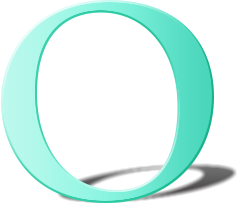
<style>
.page{position:relative;width:238px;height:203px;background:#ffffff}
.page>*{position:absolute;margin:0}
.t1{font:260px "TrajanPro-Bold";letter-spacing:0.005em}
</style>
<div class="page">
<p class="t1" style="left:1px;top:0px;width:213px;height:203px">O</p>
</div>
